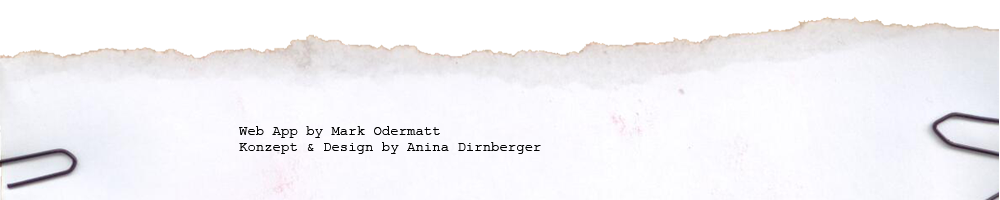
<style>
.page{position:relative;width:1000px;height:200px;background:#ffffff}
.page>*{position:absolute;margin:0}
.t1{font:14px "CourierNewPSMT";color:#000000}
</style>
<div class="page">
<p class="t1" style="left:239px;top:126px;width:302px;height:28px">Web App by Mark Odermatt<br>Konzept &amp; Design by Anina Dirnberger</p>
</div>
